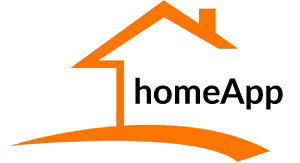
<style>
.page{position:relative;width:300px;height:163px;background:#ffffff}
.page>*{position:absolute;margin:0}
.t1{font:35px "Lato-Bold";letter-spacing:-0.005em;color:#000000}
</style>
<div class="page">
<p class="t1" style="left:135px;top:77px;width:148px;height:33px">homeApp</p>
</div>
